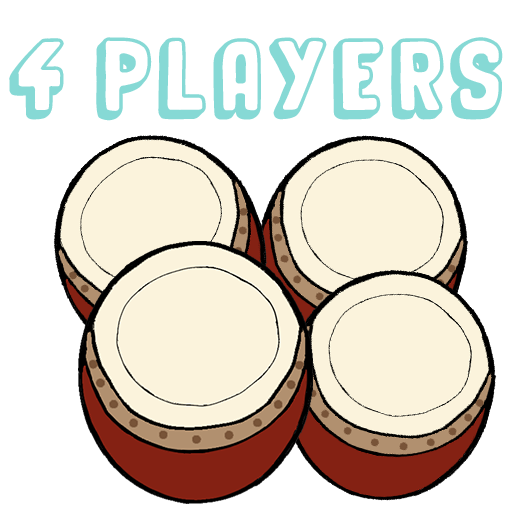
<style>
.page{position:relative;width:512px;height:512px;background:#ffffff}
.page>*{position:absolute;margin:0}
.t1{font:50px "OrganicRelief";letter-spacing:0.1em;color:#86d9d5}
</style>
<div class="page">
<p class="t1" style="left:9px;top:37px;width:494px;height:84px">4 PLAYERS</p>
</div>
